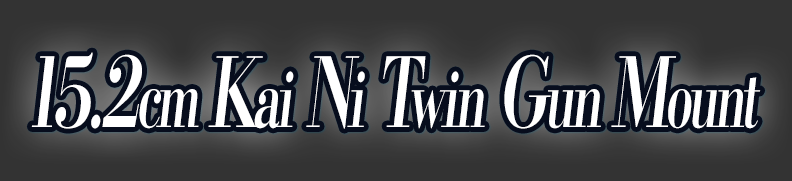
<style>
.page{position:relative;width:792px;height:181px;background:#333333}
.page>*{position:absolute;margin:0}
.t1{font:96px "KochoStd-Heavy";letter-spacing:-0.08em;color:#ffffff;font-style:italic;scale:0.65 1}
.t2{font:76.8px "KochoStd-Heavy";letter-spacing:-0.08em;color:#ffffff;font-style:italic;scale:0.65 1}
</style>
<div class="page">
<p class="t1" style="left:31px;top:52px;width:730px;height:77px">15.2<span class="t2">cm </span>K<span class="t2">ai</span> N<span class="t2">i</span> T<span class="t2">win</span> G<span class="t2">un </span>M<span class="t2">ount</span></p>
</div>
